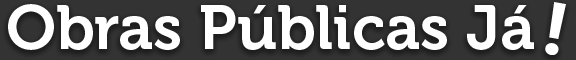
<style>
.page{position:relative;width:576px;height:60px;background:#333333}
.page>*{position:absolute;margin:0}
.t1{font:62.5px "Museo-700";color:#ffffff}
.t2{font:74.2px "SegoeUI-Bold";color:#ffffff}
</style>
<div class="page">
<p class="t1" style="left:8px;top:4px;width:526px;height:46px">Obras Públicas Já</p>
<p class="t2" style="left:545px;top:2px;width:21px;height:53px;rotate:10deg">!</p>
</div>
